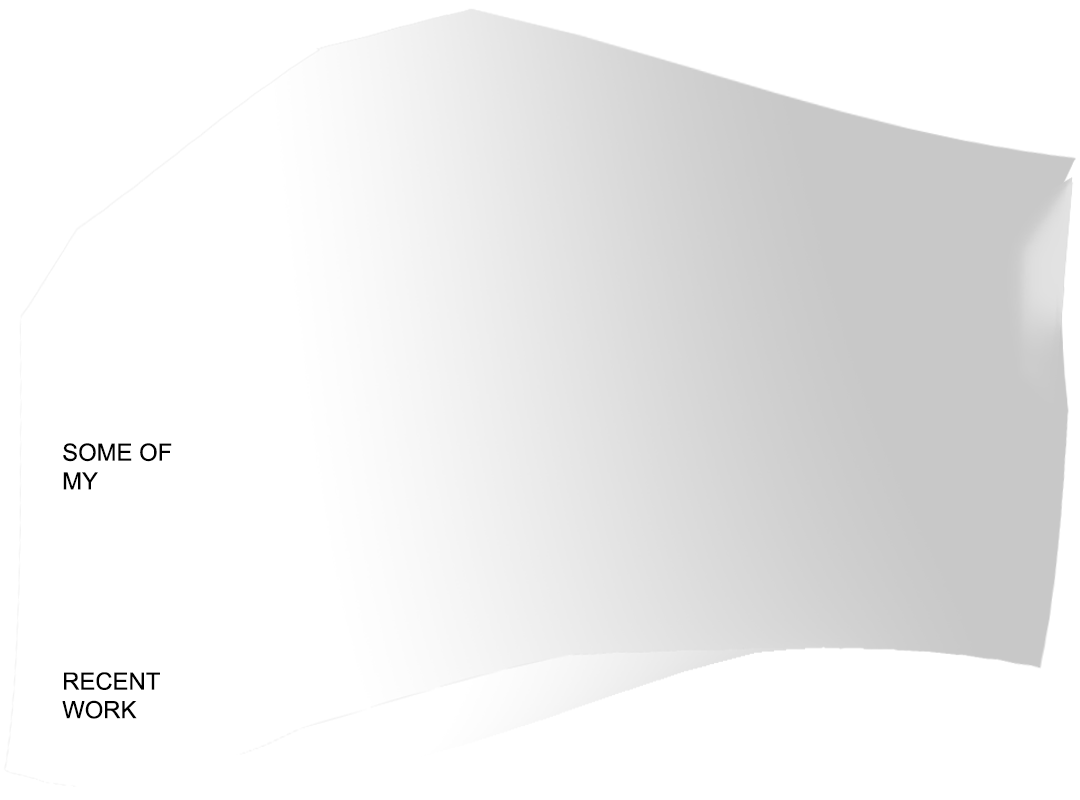
<style>
.page{position:relative;width:1080px;height:800px;background:#ffffff}
.page>*{position:absolute;margin:0}
.t1{font:23.8px "ArialMT";color:#000000;text-transform:uppercase}
</style>
<div class="page">
<p class="t1" style="left:62px;top:443px;width:110px;height:276px">some of<br>my <br><br><br><br><br><br><br>recent<br>work</p>
</div>
